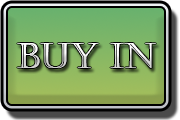
<style>
.page{position:relative;width:180px;height:120px}
.page>*{position:absolute;margin:0}
.t1{font:34.6px "Castellar"}
.t2{font:34.6px "PerpetuaTitlingMT-Bold";scale:0.6 1}
</style>
<div class="page">
<p class="t1" style="left:17px;top:43px;width:139px;height:25px"><span class="t2"><br></span>BUY IN</p>
</div>
